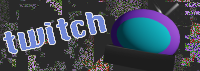
<style>
.page{position:relative;width:200px;height:71px;background:#292929}
.page>*{position:absolute;margin:0}
.t1{font:29.2px "Krungthep";color:#7289da}
</style>
<div class="page">
<p class="t1" style="left:4px;top:13px;width:102px;height:40px;rotate:-13deg">twitch</p>
</div>
